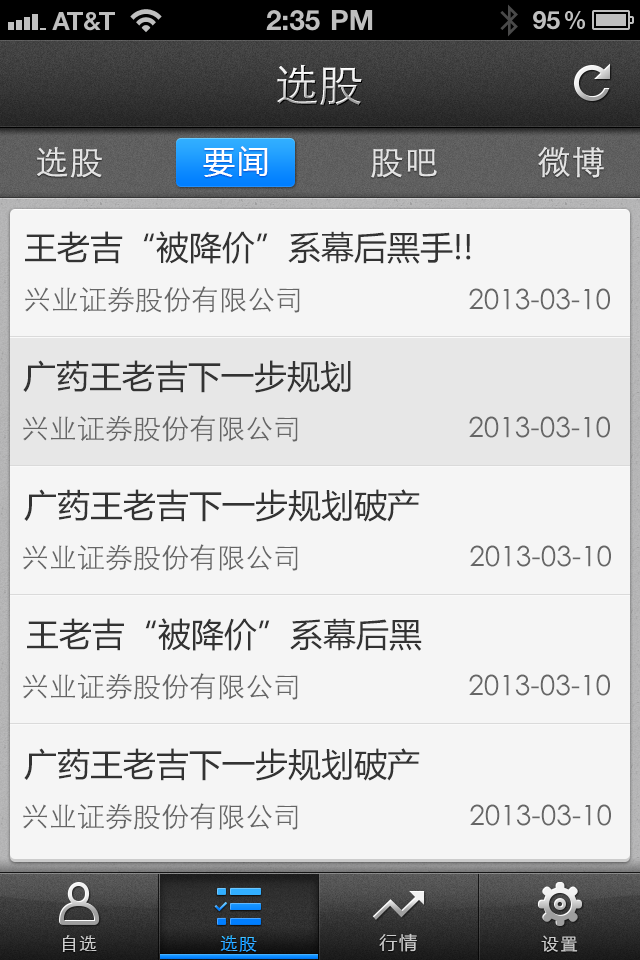
<style>
.page{position:relative;width:640px;height:960px;background:#f5f5f5}
.page>*{position:absolute;margin:0}
.t1{font:44px "STXihei";letter-spacing:0.005em}
.t2{font:33px "STXihei";letter-spacing:0.05em;color:#e3e3e3}
.t3{font:32px "MicrosoftYaHei";letter-spacing:0.05em;color:#ffffff}
.t4{font:33px "MicrosoftYaHei";color:#333333}
.t5{font:28px "STXihei";color:#666666}
.t6{font:18px "STXihei";letter-spacing:0.05em;color:#cccccc}
.t7{font:18px "STXihei";letter-spacing:0.05em}
.t8{font:18px "MicrosoftYaHei";letter-spacing:0.1em;color:#cccccc}
</style>
<div class="page">
<p class="t1" style="left:277px;top:64px;width:85px;height:42px">选股</p>
<p class="t2" style="left:37px;top:147px;width:65px;height:31px">选股</p>
<p class="t3" style="left:203px;top:146px;width:65px;height:31px">要闻</p>
<p class="t2" style="left:371px;top:149px;width:66px;height:29px">股吧</p>
<p class="t2" style="left:538px;top:146px;width:66px;height:32px">微博</p>
<p class="t4" style="left:25px;top:231px;width:446px;height:33px">王老吉“被降价”系幕后黑手!!</p>
<p class="t5" style="left:25px;top:286px;width:275px;height:27px">兴业证券股份有限公司</p>
<p class="t5" style="left:469px;top:288px;width:141px;height:22px">2013-03-10</p>
<p class="t4" style="left:23px;top:360px;width:328px;height:33px">广药王老吉下一步规划</p>
<p class="t5" style="left:23px;top:415px;width:275px;height:27px">兴业证券股份有限公司</p>
<p class="t5" style="left:469px;top:416px;width:141px;height:22px">2013-03-10</p>
<p class="t4" style="left:24px;top:489px;width:396px;height:33px">广药王老吉下一步规划破产</p>
<p class="t5" style="left:23px;top:544px;width:275px;height:27px">兴业证券股份有限公司</p>
<p class="t5" style="left:470px;top:545px;width:141px;height:22px">2013-03-10</p>
<p class="t4" style="left:27px;top:618px;width:395px;height:33px">王老吉“被降价”系幕后黑</p>
<p class="t5" style="left:23px;top:673px;width:275px;height:27px">兴业证券股份有限公司</p>
<p class="t5" style="left:469px;top:674px;width:141px;height:22px">2013-03-10</p>
<p class="t4" style="left:24px;top:748px;width:396px;height:33px">广药王老吉下一步规划破产</p>
<p class="t5" style="left:23px;top:803px;width:275px;height:27px">兴业证券股份有限公司</p>
<p class="t5" style="left:470px;top:804px;width:141px;height:22px">2013-03-10</p>
<p class="t6" style="left:62px;top:935px;width:35px;height:17px">自选</p>
<p class="t7" style="left:220px;top:935px;width:37px;height:17px">选股</p>
<p class="t8" style="left:379px;top:933px;width:38px;height:19px">行情</p>
<p class="t6" style="left:541px;top:935px;width:37px;height:17px">设置</p>
</div>
